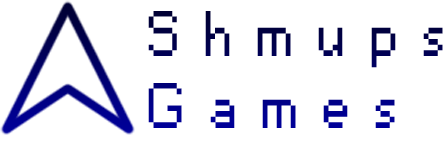
<style>
.page{position:relative;width:448px;height:146px;background:#ffffff}
.page>*{position:absolute;margin:0}
.t1{font:60px "Small Fonts";letter-spacing:0.4em}
</style>
<div class="page">
<p class="t1" style="left:148px;top:11px;width:295px;height:117px">Shmups <br>Games</p>
</div>
